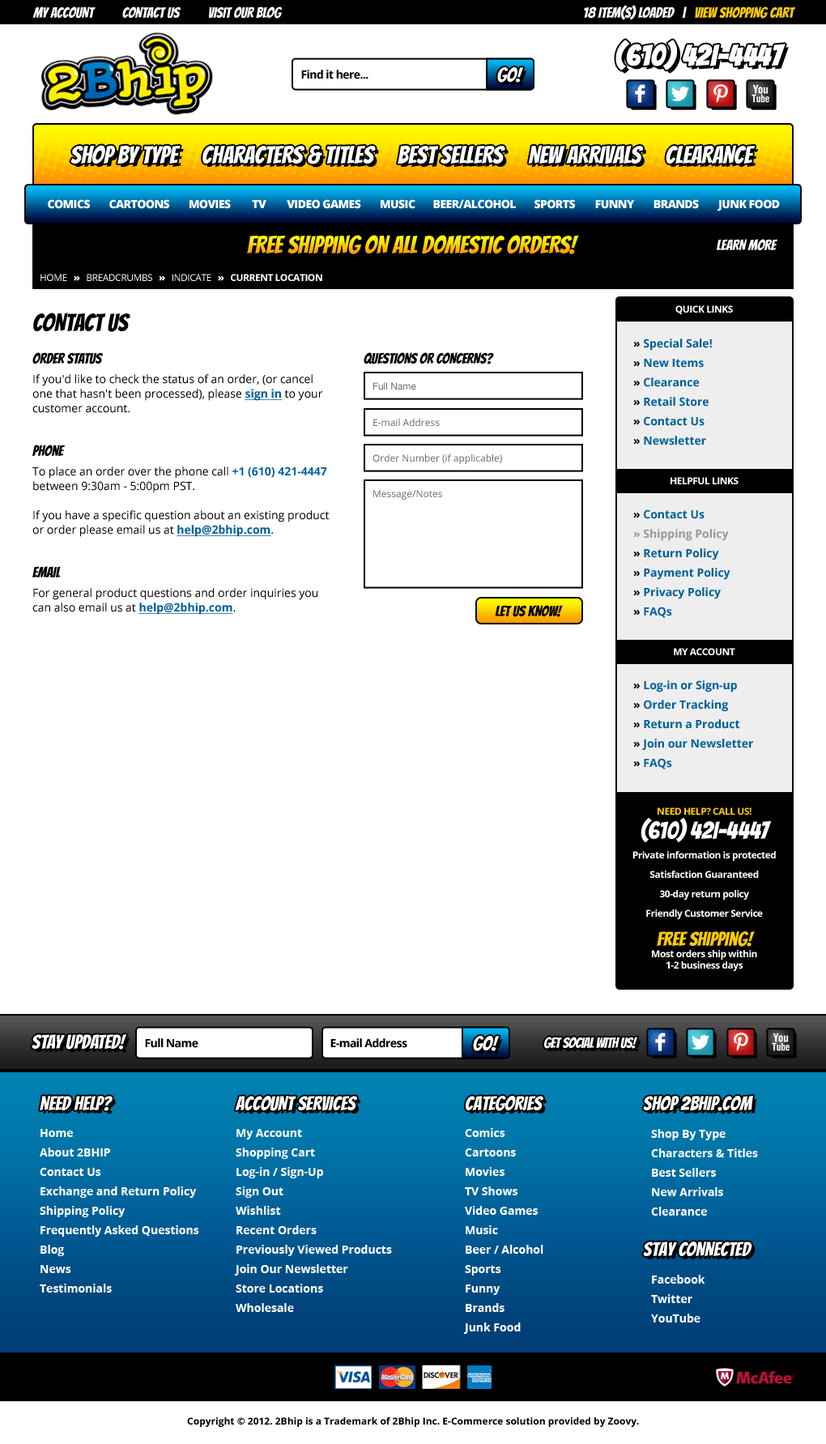
<style>
.page{position:relative;width:826px;height:1444px;background:#ffffff}
.page>*{position:absolute;margin:0}
.t1{font:14.6px "Bangers-Regular";color:#ffffff}
.t2{font:14.6px "Bangers-Regular";color:#ffcc00}
.t3{font:29.2px "Bangers-Regular";color:#ffffff;font-weight:bold}
.t4{font:11.3px "OpenSans-Bold";letter-spacing:-0.04em;color:#000000}
.t5{font:19.4px "Bangers-Regular";color:#ffffff}
.t6{font:24.3px "Bangers-Regular";color:#ffffff}
.t7{font:11.3px "OpenSans-Extrabold";letter-spacing:-0.04em;color:#ffffff}
.t8{font:24.3px "Bangers-Regular"}
.t9{font:9.7px "OpenSans-Bold";letter-spacing:-0.04em;color:#ffffff}
.t10{font:9.7px "OpenSans";letter-spacing:-0.04em;color:#ffffff}
.t11{font:9.7px "OpenSans-Extrabold";letter-spacing:-0.04em;color:#ffffff}
.t12{font:24.3px "Bangers-Regular";color:#000000}
.t13{font:11.3px/19.4px "OpenSans-Bold";color:#006099}
.t14{font:11.3px/19.4px "OpenSans-Bold";color:#000000}
.t15{font:11.3px/14.6px "OpenSans";color:#000000}
.t16{font:14.6px/14.6px "Bangers-Regular";color:#000000}
.t17{font:11.3px/19.4px "OpenSans";color:#000000}
.t18{font:11.3px/14.6px "OpenSans-Bold";color:#006099;text-decoration:underline}
.t19{font:14.6px "Bangers-Regular";color:#000000}
.t20{font:9.7px "HelveticaNeueLTPro-Roman";color:#666666}
.t21{font:9.7px "OpenSans";color:#666666}
.t22{font:11.3px/19.4px "OpenSans-Bold";color:#999999}
.t23{font:9.7px/19.4px "OpenSans-Bold";letter-spacing:-0.04em;color:#ffffff}
.t24{font:9.7px/19.4px "OpenSans-Bold";letter-spacing:-0.04em;color:#ffcc00;text-transform:uppercase}
.t25{font:24.3px/24.3px "Bangers-Regular";color:#ffffff}
.t26{font:19.4px/29.2px "Bangers-Regular";color:#ffcc00}
.t27{font:9.7px/11.3px "OpenSans-Bold";letter-spacing:-0.04em;color:#ffffff}
.t28{font:14.6px "Bangers-Regular";letter-spacing:-0.025em;color:#ffffff}
.t29{font:11.3px/19.4px "OpenSans-Bold";color:#ffffff}
.t30{font:9.7px "OpenSans-Bold";color:#000000}
</style>
<div class="page">
<p class="t1" style="left:584px;top:5px;width:211px;height:15px">18 ITEM(S) LOADED   |   <span class="t2">VIEW SHOPPING CART</span></p>
<p class="t1" style="left:32px;top:6px;width:251px;height:13px">MY ACCOUNT          CONTACT US          VISIT OUR BLOG</p>
<p class="t3" style="left:615px;top:40px;width:170px;height:30px">(610) 42I-4447</p>
<p class="t4" style="left:301px;top:70px;width:67px;height:9px">Find it here...</p>
<p class="t5" style="left:497px;top:67px;width:27px;height:16px">GO!</p>
<p class="t6" style="left:70px;top:145px;width:111px;height:19px">SHOP BY TYPE</p>
<p class="t6" style="left:202px;top:145px;width:174px;height:19px">CHARACTERS &amp; TITLES</p>
<p class="t6" style="left:398px;top:145px;width:107px;height:19px">BEST SELLERS</p>
<p class="t6" style="left:528px;top:145px;width:115px;height:19px">NEW ARRIVALS</p>
<p class="t6" style="left:666px;top:145px;width:89px;height:19px">CLEARANCE</p>
<p class="t7" style="left:48px;top:199px;width:42px;height:10px">COMICS</p>
<p class="t7" style="left:109px;top:199px;width:60px;height:10px">CARTOONS</p>
<p class="t7" style="left:189px;top:199px;width:42px;height:10px">MOVIES</p>
<p class="t7" style="left:252px;top:200px;width:14px;height:8px">TV</p>
<p class="t7" style="left:287px;top:199px;width:74px;height:10px">VIDEO GAMES</p>
<p class="t7" style="left:381px;top:199px;width:34px;height:10px">MUSIC</p>
<p class="t7" style="left:433px;top:199px;width:83px;height:10px">BEER/ALCOHOL</p>
<p class="t7" style="left:534px;top:199px;width:41px;height:10px">SPORTS</p>
<p class="t7" style="left:595px;top:200px;width:40px;height:9px">FUNNY</p>
<p class="t7" style="left:653px;top:199px;width:46px;height:10px">BRANDS</p>
<p class="t7" style="left:717px;top:199px;width:63px;height:12px">JUNK FOOD</p>
<p class="t8" style="left:247px;top:235px;width:332px;height:19px">FREE SHIPPING ON ALL DOMESTIC ORDERS!</p>
<p class="t1" style="left:717px;top:239px;width:60px;height:11px">LEARN MORE</p>
<p class="t9" style="left:40px;top:274px;width:282px;height:7px"><span class="t10">HOME   </span><span class="t11">»</span><span class="t10">   BREADCRUMBS   </span><span class="t11">»</span><span class="t10">   INDICATE   </span><span class="t11">»   </span>CURRENT LOCATION</p>
<p class="t9" style="left:675px;top:305px;width:58px;height:9px">QUICK LINKS</p>
<p class="t12" style="left:33px;top:313px;width:97px;height:19px">CONTACT US</p>
<p class="t13" style="left:633px;top:338px;width:79px;height:107px"><span class="t14">» </span>Special Sale!<br><span class="t14">» </span>New Items<br><span class="t14">» </span>Clearance<br><span class="t14">» </span>Retail Store<br><span class="t14">» </span>Contact Us<br><span class="t14">» </span>Newsletter</p>
<p class="t15" style="left:32px;top:352px;width:298px;height:263px"><span class="t16">Order Status<br></span><span class="t17">If you'd like to check the status of an order, (or cancel<br></span>one that hasn't been processed), please <span class="t18">sign in </span>to your customer account.<br><br><br><span class="t16">Phone<br></span><span class="t17">To place an order over the phone call </span><span class="t13">+1 (610) 421-4447 </span>between 9:30am - 5:00pm PST.<br><br>If you have a specific question about an existing product or order please email us at <span class="t18">help@2bhip.com</span>.<br><br><br><span class="t16">Email<br></span><span class="t17">For general product questions and order inquiries you </span>can also email us at <span class="t18">help@2bhip.com</span>.</p>
<p class="t19" style="left:364px;top:352px;width:130px;height:12px">QUESTIONS OR CONCERNS?</p>
<p class="t20" style="left:373px;top:382px;width:43px;height:8px">Full Name</p>
<p class="t21" style="left:373px;top:419px;width:67px;height:7px">E-mail Address</p>
<p class="t21" style="left:372px;top:454px;width:130px;height:10px">Order Number (if applicable)</p>
<p class="t9" style="left:670px;top:477px;width:68px;height:7px">HELPFUL LINKS</p>
<p class="t21" style="left:373px;top:490px;width:69px;height:10px">Message/Notes</p>
<p class="t22" style="left:633px;top:509px;width:97px;height:109px"><span class="t14">» </span><span class="t13">Contact Us<br></span>» Shipping Policy<br><span class="t14">» </span><span class="t13">Return Policy<br></span><span class="t14">» </span><span class="t13">Payment Policy<br></span><span class="t14">» </span><span class="t13">Privacy Policy<br></span><span class="t14">» </span><span class="t13">FAQs</span></p>
<p class="t19" style="left:495px;top:605px;width:68px;height:12px">LET US KNOW!</p>
<p class="t9" style="left:674px;top:648px;width:61px;height:7px">MY ACCOUNT</p>
<p class="t13" style="left:633px;top:680px;width:120px;height:89px"><span class="t14">» </span>Log-in or Sign-up<br><span class="t14">» </span>Order Tracking<br><span class="t14">» </span>Return a Product<br><span class="t14">» </span>Join our Newsletter<br><span class="t14">» </span>FAQs</p>
<p class="t23" style="left:632px;top:807px;width:144px;height:164px;text-align:center"><span class="t24">Need Help? Call us!<br></span><span class="t25">(610) 42I-4447<br></span>Private information is protected<br>Satisfaction Guaranteed<br>30-day return policy<br>Friendly Customer Service<br><span class="t26">Free Shipping!<br></span><span class="t27">Most orders ship within<br>1-2 business days</span></p>
<p class="t5" style="left:32px;top:1034px;width:95px;height:15px">STAY UPDATED!</p>
<p class="t5" style="left:473px;top:1036px;width:27px;height:15px">GO!</p>
<p class="t28" style="left:544px;top:1036px;width:94px;height:13px">GET SOCIAL WITH US!</p>
<p class="t4" style="left:145px;top:1038px;width:53px;height:10px">Full Name</p>
<p class="t4" style="left:330px;top:1038px;width:77px;height:10px">E-mail Address</p>
<p class="t5" style="left:40px;top:1096px;width:73px;height:15px">NEED HELP?</p>
<p class="t5" style="left:235px;top:1096px;width:122px;height:15px">ACCOUNT SERVICES</p>
<p class="t5" style="left:466px;top:1096px;width:77px;height:15px">CATEGORIES</p>
<p class="t5" style="left:643px;top:1096px;width:110px;height:15px">SHOP 2BHIP.COM</p>
<p class="t29" style="left:40px;top:1129px;width:159px;height:163px">Home<br>About 2BHIP<br>Contact Us<br>Exchange and Return Policy<br>Shipping Policy<br>Frequently Asked Questions<br>Blog<br>News<br>Testimonials</p>
<p class="t29" style="left:234px;top:1129px;width:158px;height:183px">My Account<br>Shopping Cart<br>Log-in / Sign-Up<br>Sign Out<br>Wishlist<br>Recent Orders<br>Previously Viewed Products<br>Join Our Newsletter<br>Store Locations<br>Wholesale</p>
<p class="t29" style="left:463px;top:1128px;width:80px;height:206px">Comics<br>Cartoons<br>Movies<br>TV Shows<br>Video Games<br>Music<br>Beer / Alcohol<br>Sports<br>Funny<br>Brands<br>Junk Food</p>
<p class="t29" style="left:651px;top:1129px;width:107px;height:86px">Shop By Type<br>Characters &amp; Titles<br>Best Sellers<br>New Arrivals<br>Clearance</p>
<p class="t5" style="left:643px;top:1241px;width:109px;height:15px">STAY CONNECTED</p>
<p class="t29" style="left:651px;top:1275px;width:54px;height:47px">Facebook<br>Twitter<br>YouTube</p>
<p class="t30" style="left:187px;top:1417px;width:452px;height:10px">Copyright © 2012. 2Bhip is a Trademark of 2Bhip Inc. E-Commerce solution provided by Zoovy.</p>
</div>
